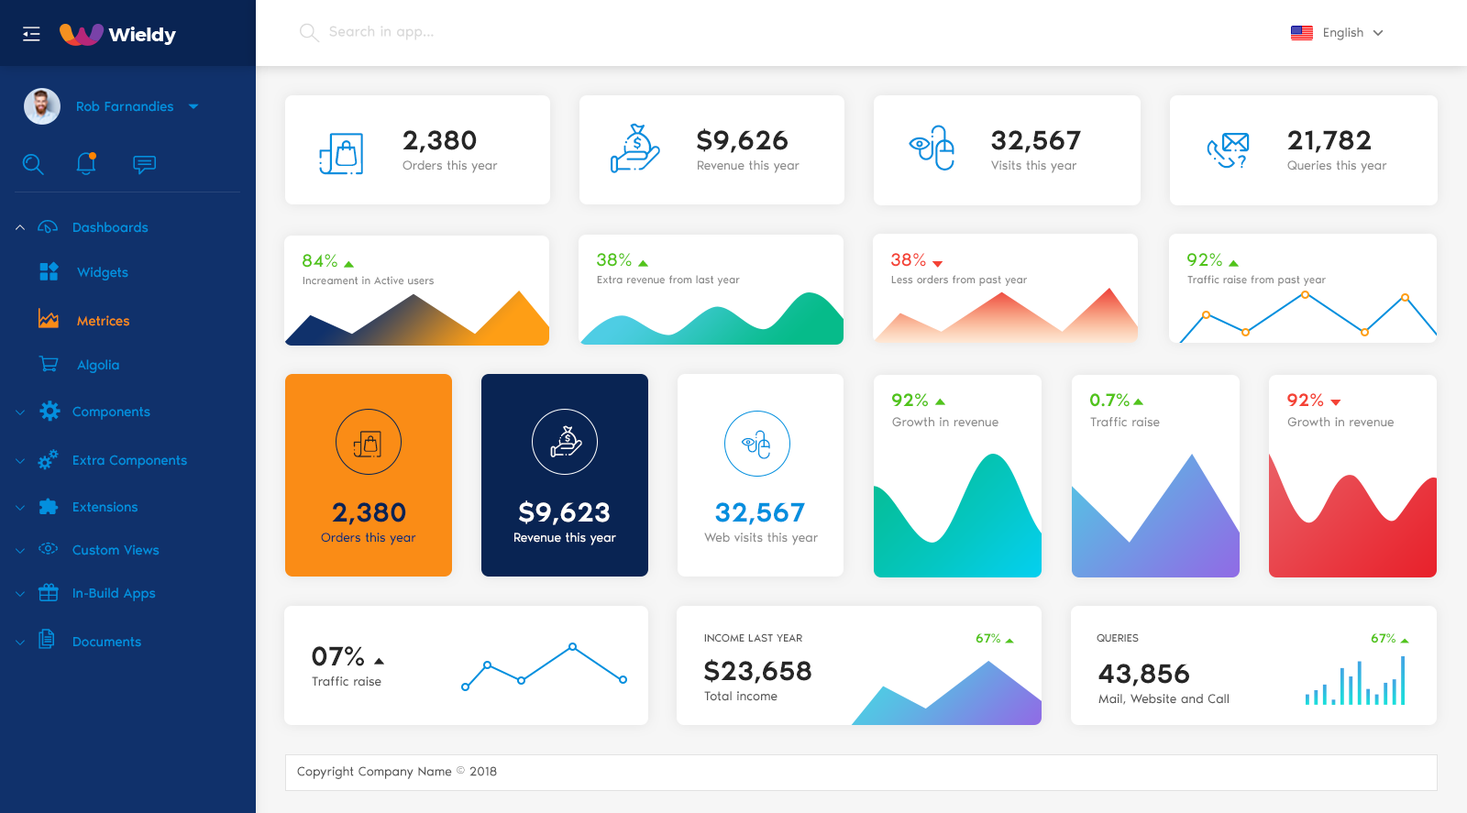
<style>
.page{position:relative;width:1467px;height:813px;background:#ffffff}
.page>*{position:absolute;margin:0}
.t1{font:14.7px "NoirPro-Regular";color:#d9d9d9}
.t2{font:12.8px "NoirPro-Regular";color:#757575}
.t3{font:13.7px "NoirPro-Regular";color:#038fde}
.t4{font:27.5px "NoirPro-Medium";color:#262626}
.t5{font:12.8px "NoirPro-Regular";color:#8c8c8c}
.t6{font:20.2px "gaxonant";color:#038fde}
.t7{font:11px "gaxonant"}
.t8{font:18.3px "NoirPro-Regular";color:#52c41a}
.t9{font:18.3px "NoirPro-Regular";color:#f44336}
.t10{font:11px "NoirPro-Regular";color:#8c8c8c}
.t11{font:20.2px "gaxonant";color:#fa8c16}
.t12{font:13.7px "NoirPro-Regular";color:#fa8c16}
.t13{font:18.3px "NoirPro-Medium";color:#52c41a}
.t14{font:18.3px "NoirPro-Medium";color:#f44336}
.t15{font:10.7px "gaxonant";color:#038fde}
.t16{font:27.5px "NoirPro-Medium";color:#092453}
.t17{font:27.5px "NoirPro-Medium";color:#ffffff}
.t18{font:27.5px "NoirPro-Medium";color:#038fde}
.t19{font:12.8px "NoirPro-Regular";color:#10316b}
.t20{font:12.8px "NoirPro-Regular";color:#ffffff}
.t21{font:11px "NoirPro-Regular";color:#595959;text-transform:uppercase}
.t22{font:12.8px "NoirPro-Medium";color:#52c41a}
.t23{font:12.8px "NoirPro-Regular";color:#595959}
</style>
<div class="page">
<p class="t1" style="left:329px;top:26px;width:105px;height:14px">Search in app...</p>
<p class="t2" style="left:1324px;top:27px;width:39px;height:13px">English</p>
<p class="t3" style="left:77px;top:101px;width:96px;height:11px">Rob Farnandies</p>
<p class="t4" style="left:402px;top:130px;width:75px;height:23px">2,380</p>
<p class="t4" style="left:697px;top:128px;width:90px;height:25px">$9,626</p>
<p class="t4" style="left:991px;top:130px;width:90px;height:23px">32,567</p>
<p class="t4" style="left:1287px;top:130px;width:83px;height:23px">21,782</p>
<p class="t5" style="left:402px;top:160px;width:96px;height:13px">Orders this year</p>
<p class="t5" style="left:698px;top:160px;width:101px;height:13px">Revenue this year</p>
<p class="t5" style="left:991px;top:160px;width:85px;height:13px">Visits this year</p>
<p class="t5" style="left:1287px;top:160px;width:100px;height:13px">Queries this year</p>
<p class="t6" style="left:38px;top:220px;width:20px;height:14px">-</p>
<p class="t3" style="left:73px;top:222px;width:75px;height:11px">Dashboards</p>
<p class="t7" style="left:16px;top:225px;width:9px;height:5px">2</p>
<p class="t8" style="left:302px;top:254px;width:35px;height:14px">84%</p>
<p class="t8" style="left:597px;top:253px;width:35px;height:14px">38%</p>
<p class="t9" style="left:891px;top:253px;width:35px;height:14px">38%</p>
<p class="t8" style="left:1187px;top:253px;width:35px;height:14px">92%</p>
<p class="t3" style="left:77px;top:267px;width:51px;height:13px">Widgets</p>
<p class="t10" style="left:302px;top:276px;width:132px;height:9px">Increament in Active users</p>
<p class="t10" style="left:597px;top:275px;width:143px;height:11px">Extra revenue from last year</p>
<p class="t10" style="left:891px;top:275px;width:136px;height:11px">Less orders from past year</p>
<p class="t10" style="left:1187px;top:275px;width:138px;height:11px">Traffic raise from past year</p>
<p class="t11" style="left:38px;top:308px;width:21px;height:20px">m</p>
<p class="t12" style="left:77px;top:315px;width:52px;height:11px">Metrices</p>
<p class="t3" style="left:77px;top:359px;width:42px;height:14px">Algolia</p>
<p class="t6" style="left:39px;top:401px;width:21px;height:21px">%</p>
<p class="t13" style="left:892px;top:393px;width:36px;height:14px">92%</p>
<p class="t13" style="left:1090px;top:393px;width:39px;height:14px">0.7%</p>
<p class="t14" style="left:1287px;top:393px;width:37px;height:14px">92%</p>
<p class="t15" style="left:16px;top:410px;width:9px;height:5px">2</p>
<p class="t3" style="left:72px;top:406px;width:78px;height:14px">Components</p>
<p class="t5" style="left:892px;top:417px;width:106px;height:10px">Growth in revenue</p>
<p class="t5" style="left:1090px;top:417px;width:70px;height:10px">Traffic raise</p>
<p class="t5" style="left:1287px;top:417px;width:106px;height:10px">Growth in revenue</p>
<p class="t15" style="left:16px;top:458px;width:9px;height:6px">2</p>
<p class="t3" style="left:73px;top:455px;width:114px;height:13px">Extra Components</p>
<p class="t15" style="left:16px;top:505px;width:9px;height:6px">2</p>
<p class="t3" style="left:73px;top:501px;width:64px;height:11px">Extensions</p>
<p class="t16" style="left:332px;top:502px;width:74px;height:23px">2,380</p>
<p class="t17" style="left:519px;top:500px;width:91px;height:25px">$9,623</p>
<p class="t18" style="left:715px;top:502px;width:90px;height:23px">32,567</p>
<p class="t19" style="left:321px;top:533px;width:95px;height:12px">Orders this year</p>
<p class="t20" style="left:514px;top:533px;width:102px;height:12px">Revenue this year</p>
<p class="t5" style="left:704px;top:533px;width:114px;height:12px">Web visits this year</p>
<p class="t6" style="left:38px;top:542px;width:20px;height:13px">,</p>
<p class="t3" style="left:72px;top:544px;width:87px;height:11px">Custom Views</p>
<p class="t15" style="left:16px;top:548px;width:9px;height:6px">2</p>
<p class="t15" style="left:16px;top:591px;width:9px;height:6px">2</p>
<p class="t3" style="left:73px;top:588px;width:83px;height:13px">In-Build Apps</p>
<p class="t6" style="left:38px;top:629px;width:16px;height:20px">)</p>
<p class="t15" style="left:16px;top:640px;width:9px;height:5px">2</p>
<p class="t3" style="left:73px;top:637px;width:68px;height:10px">Documents</p>
<p class="t21" style="left:704px;top:633px;width:98px;height:10px">income last year</p>
<p class="t22" style="left:975px;top:633px;width:25px;height:10px">67%</p>
<p class="t21" style="left:1096px;top:633px;width:42px;height:10px">queries</p>
<p class="t22" style="left:1370px;top:633px;width:25px;height:10px">67%</p>
<p class="t4" style="left:312px;top:646px;width:52px;height:20px">07%</p>
<p class="t4" style="left:704px;top:659px;width:107px;height:25px">$23,658</p>
<p class="t4" style="left:1098px;top:664px;width:91px;height:23px">43,856</p>
<p class="t23" style="left:312px;top:676px;width:69px;height:11px">Traffic raise</p>
<p class="t23" style="left:704px;top:691px;width:73px;height:10px">Total income</p>
<p class="t23" style="left:1098px;top:694px;width:130px;height:11px">Mail, Website and Call</p>
<p class="t23" style="left:297px;top:766px;width:200px;height:13px">Copyright Company Name © 2018</p>
</div>
